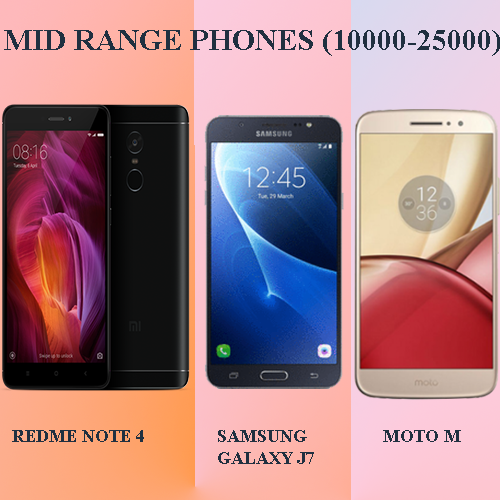
<style>
.page{position:relative;width:500px;height:500px}
.page>*{position:absolute;margin:0}
.t1{font:30px "TimesNewRomanPS-BoldMT";color:#203040}
.t2{font:18px "TimesNewRomanPS-BoldMT";color:#203040}
</style>
<div class="page">
<p class="t1" style="left:4px;top:30px;width:497px;height:26px">MID RANGE PHONES (10000-25000)</p>
<p class="t2" style="left:12px;top:430px;width:132px;height:12px">REDME NOTE 4</p>
<p class="t2" style="left:218px;top:430px;width:96px;height:34px">SAMSUNG <br>GALAXY J7</p>
<p class="t2" style="left:383px;top:430px;width:78px;height:12px">MOTO M</p>
</div>
